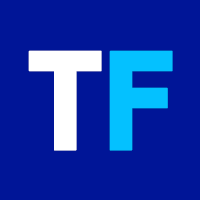
<style>
.page{position:relative;width:200px;height:200px;background:#001597}
.page>*{position:absolute;margin:0}
.t1{font:138.9px "Kollektif-Bold";letter-spacing:-0.03em;color:#ffffff;font-weight:bold}
.t2{font:138.9px "Kollektif-Bold";letter-spacing:-0.03em;color:#04c1ff;font-weight:bold}
</style>
<div class="page">
<p class="t1" style="left:28px;top:50px;width:145px;height:101px">T<span class="t2">F</span></p>
</div>
